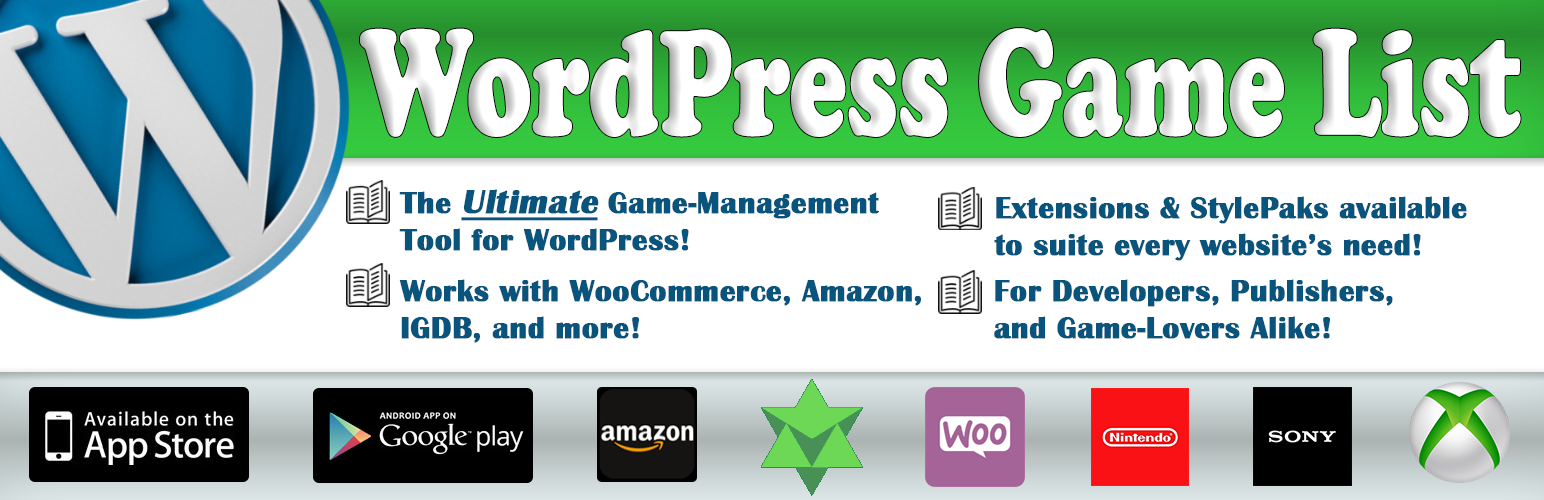
<style>
.page{position:relative;width:1544px;height:500px;background:#ffffff}
.page>*{position:absolute;margin:0}
.t1{font:156.5px "CooperBlack";color:#ffffff;scale:0.69 1}
.t2{font:31px "BritannicBold";color:#09547c;font-weight:bold}
.t3{font:35px "BritannicBold";color:#09547c;font-weight:bold;font-style:italic;text-decoration:underline}
</style>
<div class="page">
<p class="t1" style="left:360px;top:28px;width:1161px;height:109px">WordPress Game List</p>
<p class="t2" style="left:399px;top:189px;width:480px;height:62px">The <span class="t3">Ultimate</span> Game-Management<br>Tool for WordPress!</p>
<p class="t2" style="left:994px;top:196px;width:473px;height:65px">Extensions &amp; StylePaks available<br>to suite every website’s need!</p>
<p class="t2" style="left:399px;top:279px;width:522px;height:64px">Works with WooCommerce, Amazon, <br>IGDB, and more!</p>
<p class="t2" style="left:994px;top:279px;width:399px;height:60px">For Developers, Publishers, <br>and Game-Lovers Alike!</p>
</div>
